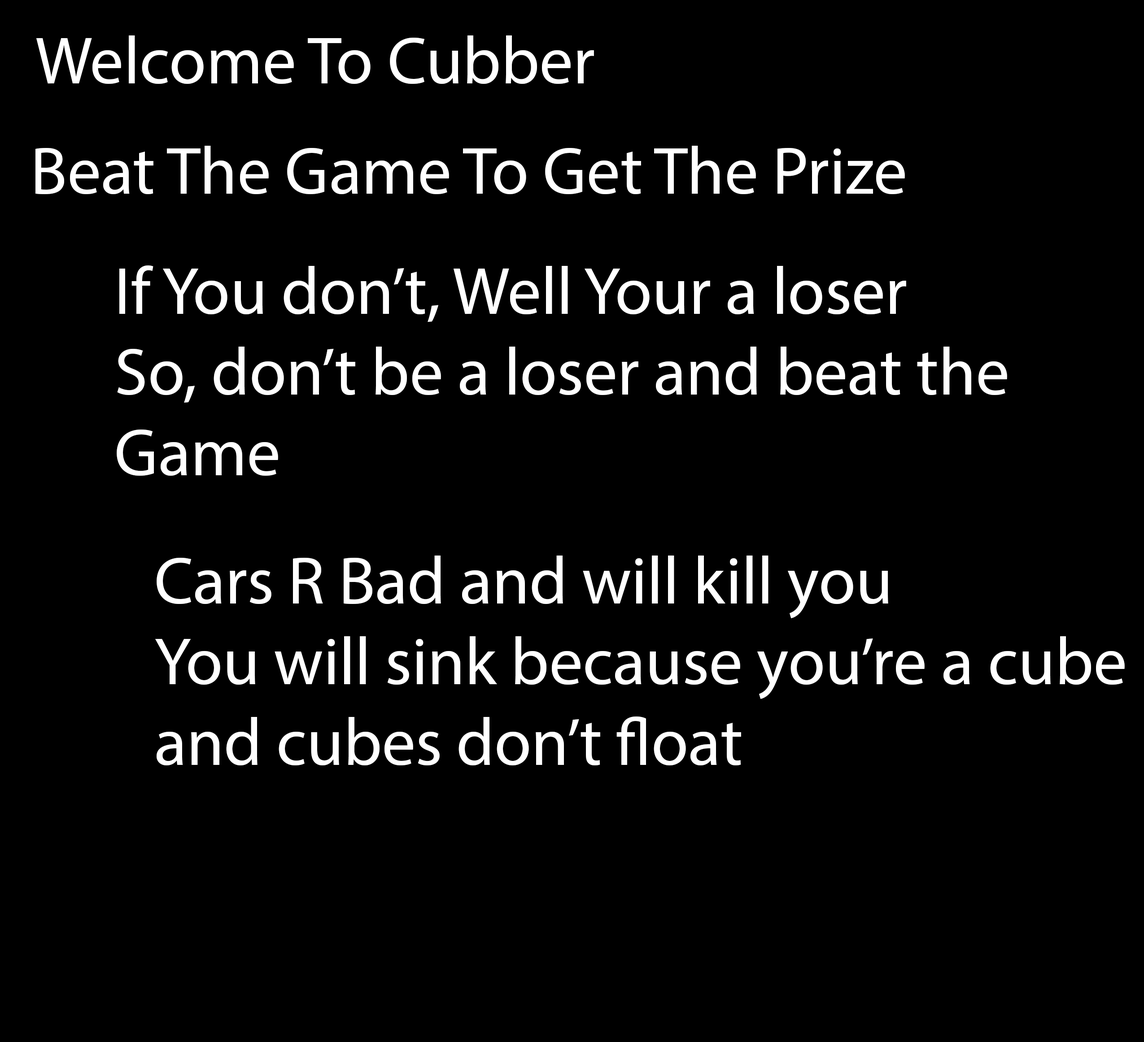
<style>
.page{position:relative;width:1144px;height:1042px;background:#000000}
.page>*{position:absolute;margin:0}
.t1{font:67.3px "MyriadPro-Regular";color:#ffffff}
</style>
<div class="page">
<p class="t1" style="left:36px;top:35px;width:558px;height:49px">Welcome To Cubber</p>
<p class="t1" style="left:35px;top:146px;width:870px;height:49px">Beat The Game To Get The Prize</p>
<p class="t1" style="left:117px;top:265px;width:890px;height:211px">If You don’t, Well Your a loser<br>So, don’t be a loser and beat the <br>Game</p>
<p class="t1" style="left:155px;top:556px;width:970px;height:210px">Cars R Bad and will kill you<br>You will sink because you’re a cube and cubes don’t float</p>
</div>
